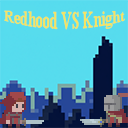
<style>
.page{position:relative;width:128px;height:128px}
.page>*{position:absolute;margin:0}
.t1{font:14px "TimesNewRomanPS-BoldMT";color:#f6e363}
</style>
<div class="page">
<p class="t1" style="left:4px;top:10px;width:122px;height:20px">Redhood VS Knight</p>
</div>
